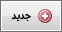
<style>
.page{position:relative;width:62px;height:32px}
.page>*{position:absolute;margin:0}
.t1{font:12px "Mj_CasablancaLight";color:#030000}
</style>
<div class="page">
<p class="t1" style="left:11px;top:13px;width:20px;height:9px">جديد</p>
</div>
